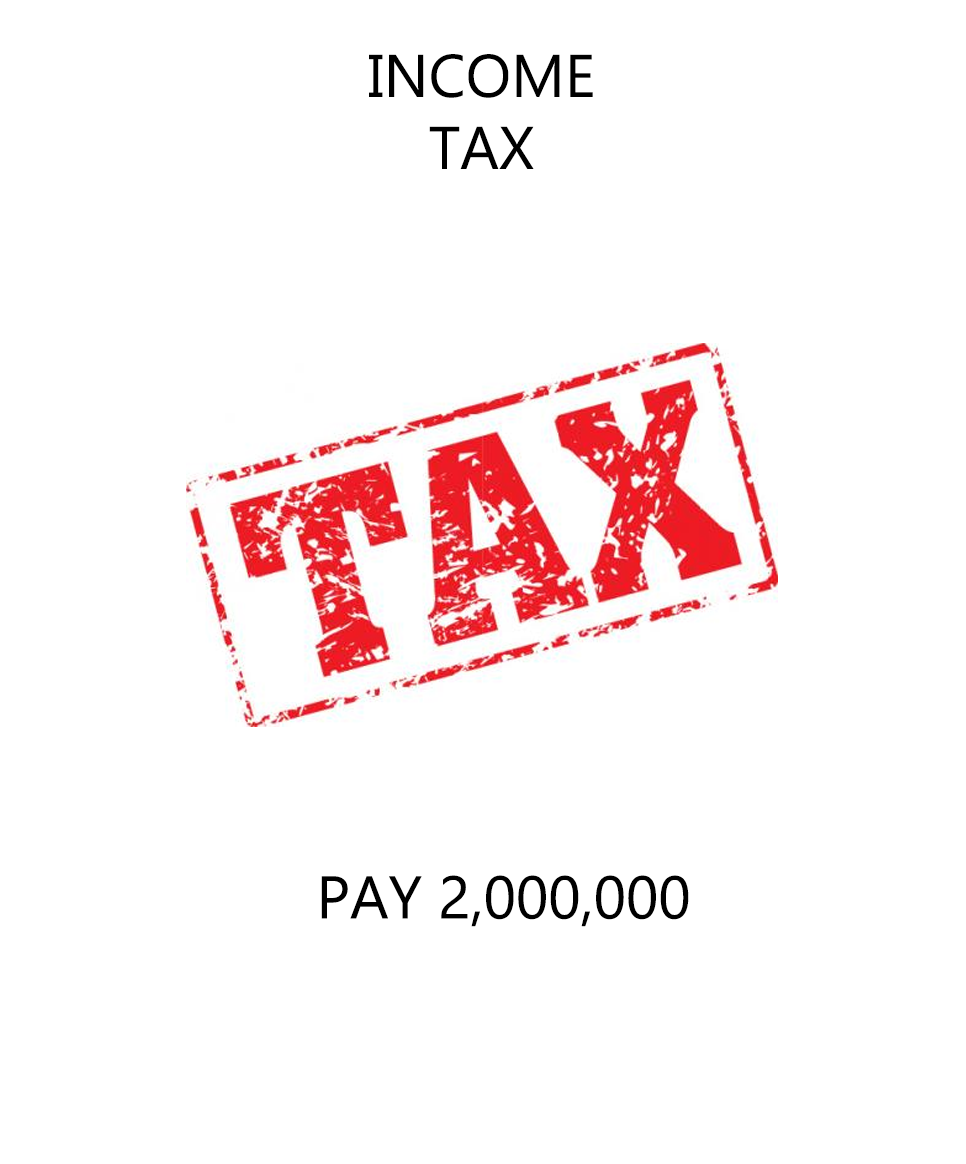
<style>
.page{position:relative;width:966px;height:1164px;background:#ffffff}
.page>*{position:absolute;margin:0}
.t1{font:60px "Ebrima";color:#000000}
</style>
<div class="page">
<p class="t1" style="left:369px;top:54px;width:224px;height:115px;text-align:center">INCOME<br>TAX</p>
<p class="t1" style="left:321px;top:875px;width:368px;height:52px">PAY 2,000,000</p>
</div>
